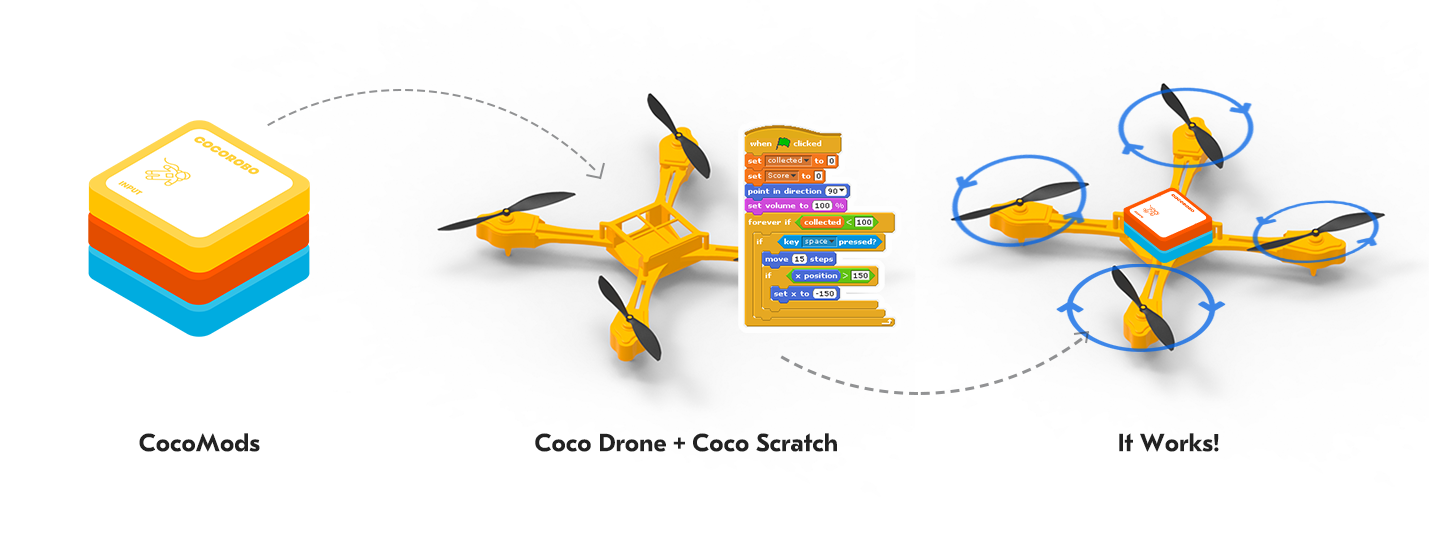
<style>
.page{position:relative;width:1440px;height:550px;background:#ffffff}
.page>*{position:absolute;margin:0}
.t1{font:25px "GTEestiProTextTrial-Bold";color:#222222}
.t2{font:25px "Montserrat-Bold";color:#222222}
</style>
<div class="page">
<p class="t1" style="left:139px;top:433px;width:121px;height:19px">CocoMods</p>
<p class="t1" style="left:535px;top:433px;width:302px;height:19px">Coco Drone <span class="t2">+</span> Coco Scratch</p>
<p class="t1" style="left:1119px;top:433px;width:100px;height:19px">It Works<span class="t2">!</span></p>
</div>
